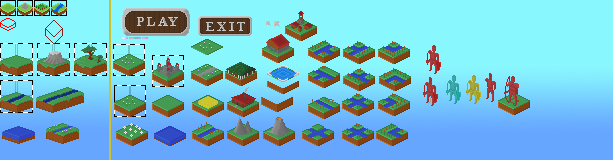
<style>
.page{position:relative;width:613px;height:160px;background:#89f7fe}
.page>*{position:absolute;margin:0}
.t1{font:12.5px "TimesNewRomanPS-BoldMT";letter-spacing:0.21em;color:#c7c7c7}
</style>
<div class="page">
<p class="t1" style="left:205px;top:22px;width:40px;height:9px">EXIT</p>
</div>
